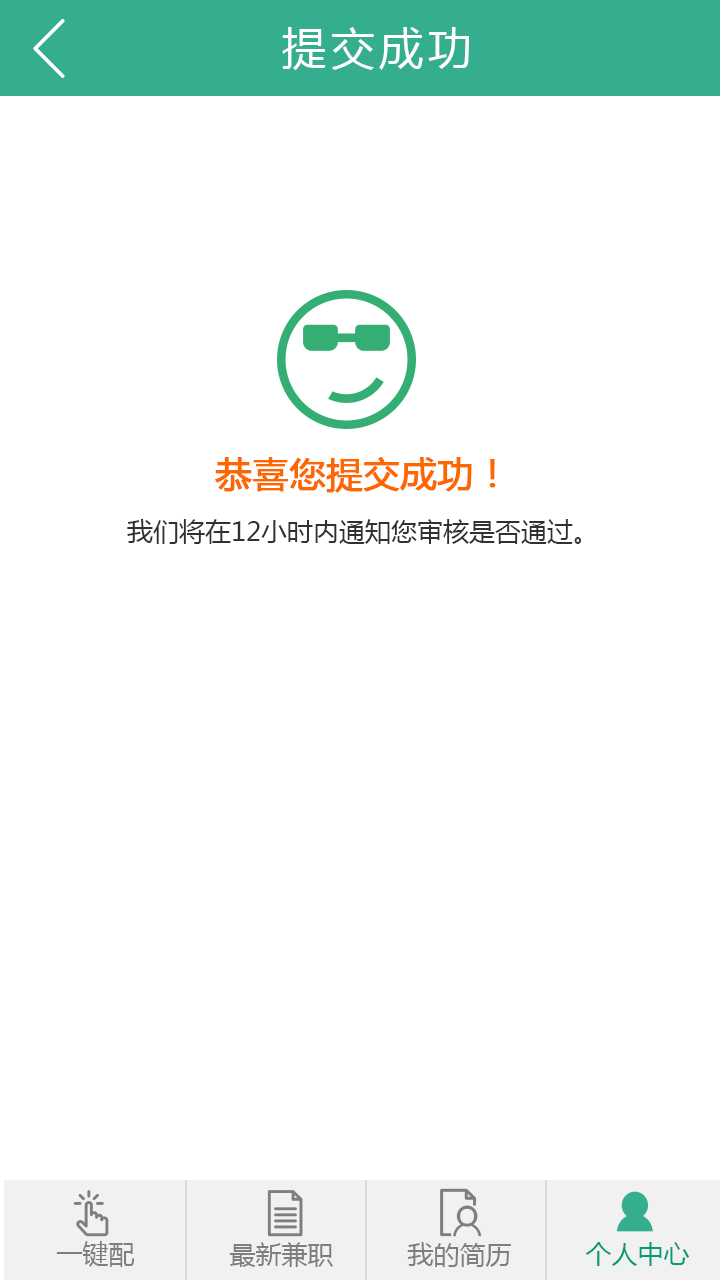
<style>
.page{position:relative;width:720px;height:1280px;background:#ffffff}
.page>*{position:absolute;margin:0}
.t1{font:44px "MicrosoftYaHei";letter-spacing:0.1em;color:#ffffff}
.t2{font:26px "MicrosoftYaHei";color:#313131}
.t3{font:36px "MicrosoftYaHei";color:#fe6600;font-weight:bold}
</style>
<div class="page">
<p class="t1" style="left:282px;top:27px;width:188px;height:43px">提交成功</p>
<p class="t2" style="left:127px;top:457px;width:454px;height:87px;text-align:center"><span class="t3">恭喜您提交成功！<br></span>我们将在12小时内通知您审核是否通过。</p>
</div>
